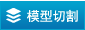
<style>
.page{position:relative;width:85px;height:30px}
.page>*{position:absolute;margin:0}
.t1{font:13px "SimHei";color:#fbfefb}
</style>
<div class="page">
<p class="t1" style="left:27px;top:9px;width:51px;height:13px">模型切割</p>
</div>
